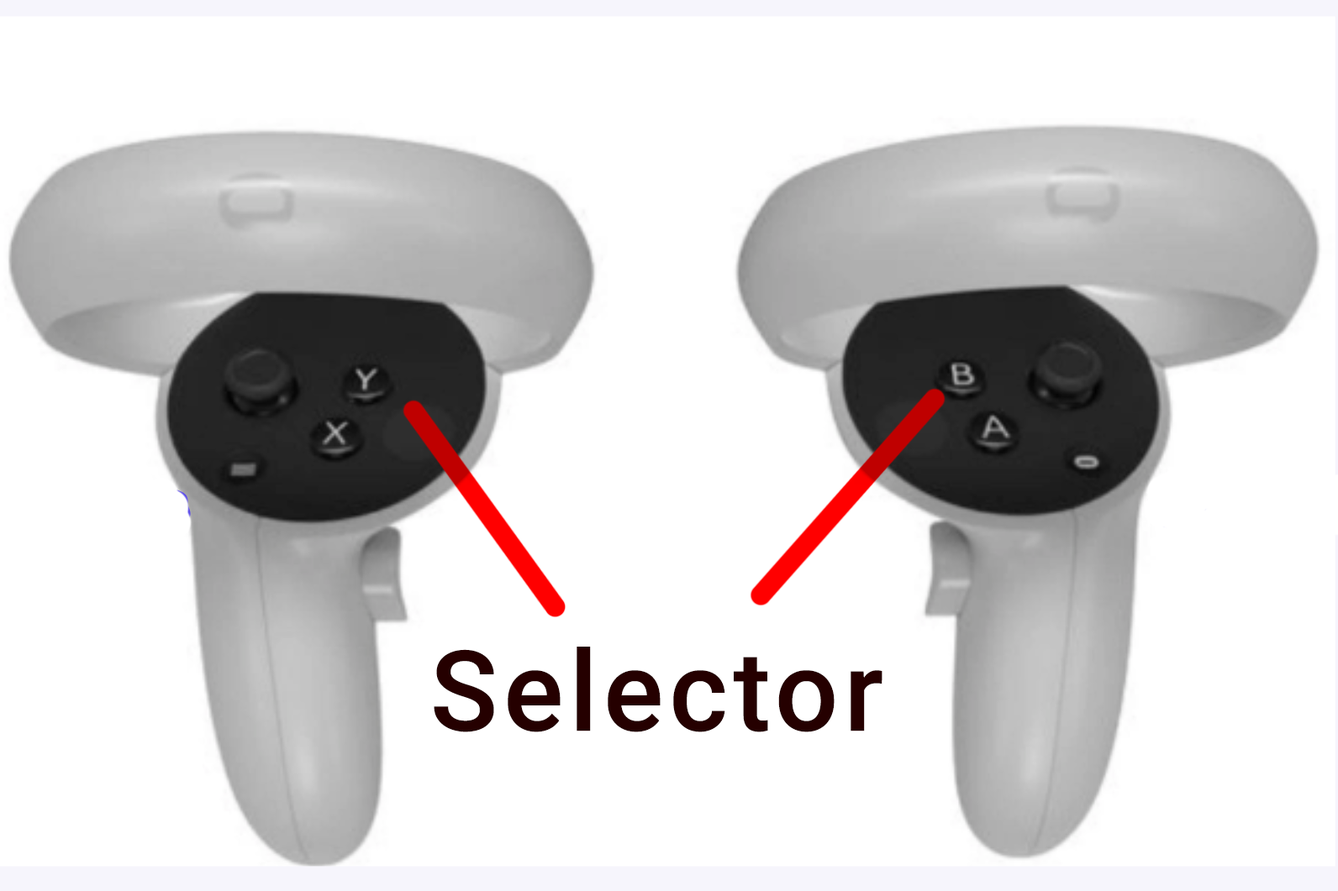
<style>
.page{position:relative;width:1338px;height:891px;background:#ffffff}
.page>*{position:absolute;margin:0}
.t1{font:112px "Roboto-Medium";letter-spacing:0.05em;color:#250000}
</style>
<div class="page">
<p class="t1" style="left:434px;top:647px;width:448px;height:86px">Selector</p>
</div>
